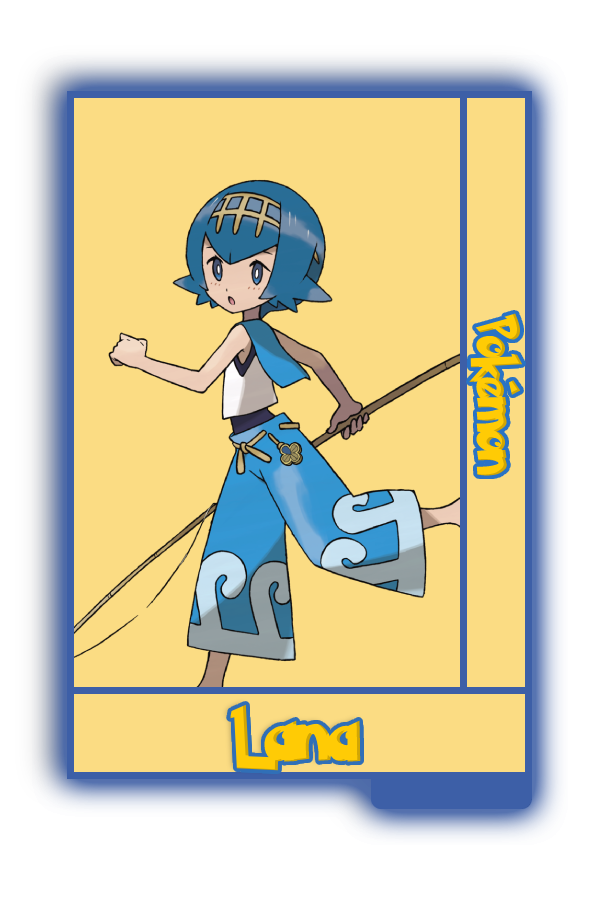
<style>
.page{position:relative;width:600px;height:900px;background:#fbdc83}
.page>*{position:absolute;margin:0}
.t1{font:48.8px "PokemonSolidNormal";color:#ffcb05;scale:0.8 1}
.t2{font:60.1px "PokemonSolidNormal";color:#ffcb05;scale:0.96 1}
</style>
<div class="page">
<p class="t1" style="left:469px;top:313px;width:54px;height:163px;rotate:90deg">Pokémon</p>
<p class="t2" style="left:230px;top:704px;width:131px;height:67px">Lana</p>
</div>
